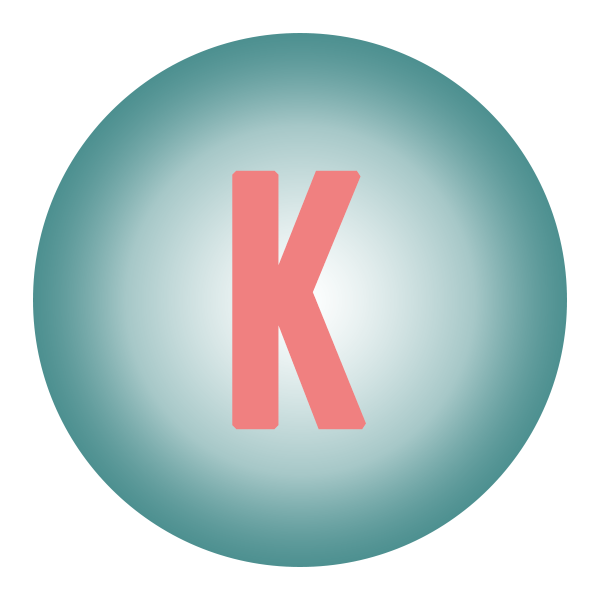
<style>
.page{position:relative;width:600px;height:600px;background:#ffffff}
.page>*{position:absolute;margin:0}
.t1{font:300px "FjallaOne-Regular";color:#f08080;text-transform:uppercase;font-weight:bold}
</style>
<div class="page">
<p class="t1" style="left:232px;top:170px;width:134px;height:260px">k</p>
</div>
